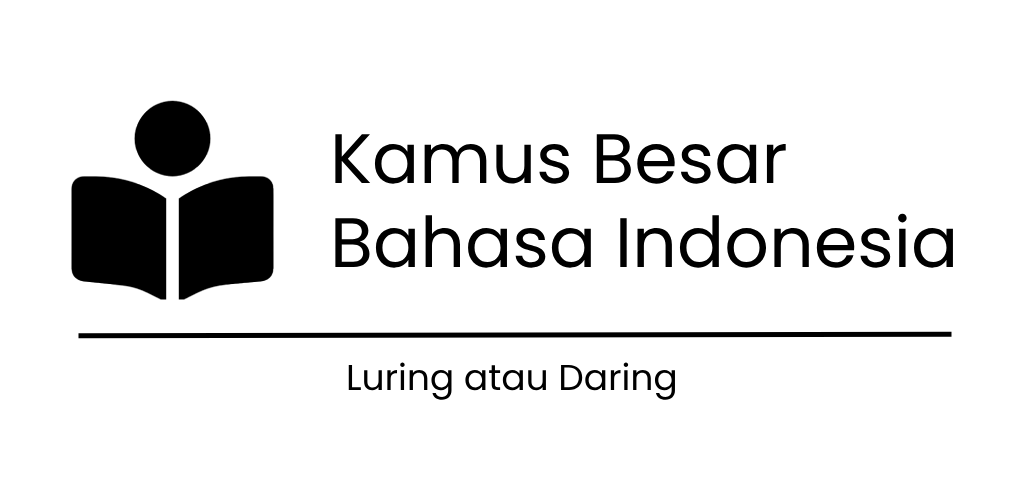
<style>
.page{position:relative;width:1024px;height:500px;background:#ffffff}
.page>*{position:absolute;margin:0}
.t1{font:70px "Poppins-Regular";color:#000000}
.t2{font:36px "Poppins-Regular";color:#000000}
</style>
<div class="page">
<p class="t1" style="left:335px;top:134px;width:618px;height:134px">Kamus Besar <br>Bahasa Indonesia</p>
<p class="t2" style="left:348px;top:362px;width:327px;height:38px">Luring atau Daring</p>
</div>
